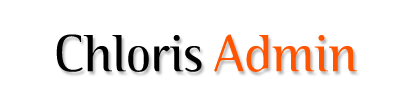
<style>
.page{position:relative;width:400px;height:100px;background:#ffffff}
.page>*{position:absolute;margin:0}
.t1{font:52px "BinaryITC-Light";color:#000000}
.t2{font:52px "BinaryITC-Light";color:#ff5500}
</style>
<div class="page">
<p class="t1" style="left:56px;top:34px;width:301px;height:38px">Chloris <span class="t2">Admin</span></p>
</div>
